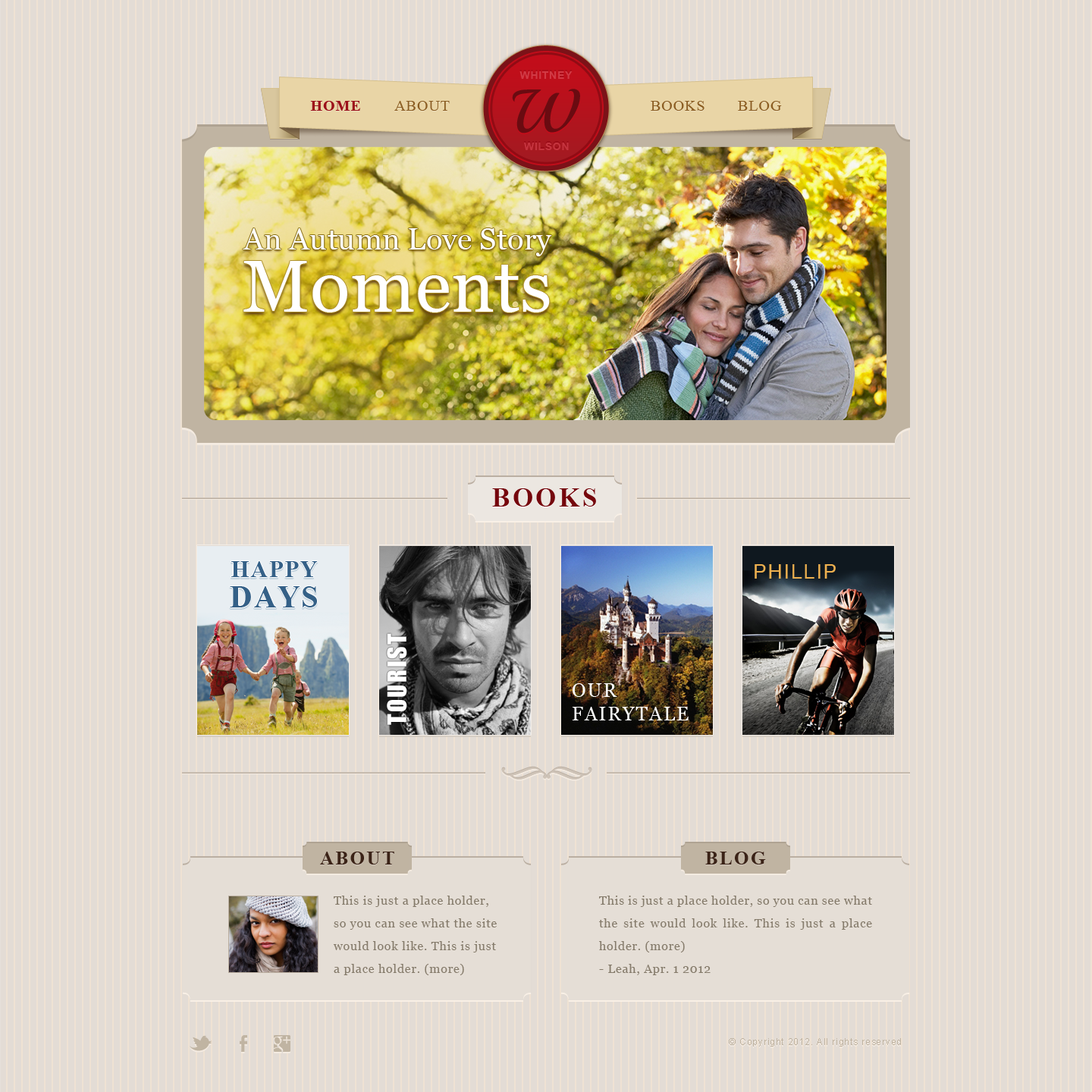
<style>
.page{position:relative;width:1092px;height:1092px;background:#e3dcd5}
.page>*{position:absolute;margin:0}
.t1{font:10.6px "Arial-BoldMT";letter-spacing:0.05em;color:#d23a45;text-transform:uppercase}
.t2{font:61.8px "Playball-Regular";color:#6a0b11;text-transform:uppercase}
.t3{font:15.2px "TimesNewRomanPS-BoldMT";letter-spacing:0.05em;color:#9c1119;text-transform:uppercase}
.t4{font:15.2px "TimesNewRomanPSMT";letter-spacing:0.05em;color:#8b5d21;text-transform:uppercase}
.t5{font:10.6px "Arial-BoldMT";letter-spacing:0.05em;color:#c5343e;text-transform:uppercase}
.t6{font:30.5px "Georgia";color:#ffffff}
.t7{font:73.9px "Georgia";color:#ffffff}
.t8{font:26.5px "TimesNewRomanPS-BoldMT";letter-spacing:0.1em;color:#75060c}
.t9{font:23.8px "TimesNewRomanPS-BoldMT";letter-spacing:0.05em;color:#346087;text-transform:uppercase}
.t10{font:20px "Helvetica";letter-spacing:0.075em;color:#edb04f;text-transform:uppercase}
.t11{font:30.8px "TimesNewRomanPS-BoldMT";letter-spacing:0.05em;color:#346087;text-transform:uppercase}
.t12{font:24.1px "Impact";letter-spacing:0.075em;color:#ffffff;text-transform:uppercase}
.t13{font:19.1px "Georgia";letter-spacing:0.075em;color:#ffffff;text-transform:uppercase}
.t14{font:19px "TimesNewRomanPS-BoldMT";letter-spacing:0.1em;color:#3b2317}
.t15{font:12.1px/22.7px "Georgia";letter-spacing:0.05em;color:#857b6b}
.t16{font:9.1px "ArialMT";letter-spacing:0.075em;color:#c0b4a2}
</style>
<div class="page">
<p class="t1" style="left:519px;top:71px;width:54px;height:8px">Whitney</p>
<p class="t2" style="left:512px;top:89px;width:68px;height:44px">W</p>
<p class="t3" style="left:310px;top:101px;width:50px;height:10px">Home</p>
<p class="t4" style="left:394px;top:101px;width:56px;height:10px">About</p>
<p class="t4" style="left:651px;top:101px;width:53px;height:10px">Books</p>
<p class="t4" style="left:738px;top:101px;width:44px;height:10px">Blog</p>
<p class="t5" style="left:524px;top:143px;width:45px;height:7px">wilson</p>
<p class="t6" style="left:243px;top:228px;width:309px;height:28px">An Autumn Love Story</p>
<p class="t7" style="left:243px;top:261px;width:307px;height:51px">Moments</p>
<p class="t8" style="left:492px;top:488px;width:104px;height:19px">BOOKS</p>
<p class="t9" style="left:231px;top:561px;width:87px;height:16px">Happy</p>
<p class="t10" style="left:755px;top:564px;width:81px;height:15px">phillip</p>
<p class="t11" style="left:230px;top:586px;width:87px;height:21px">days</p>
<p class="t12" style="left:387px;top:633px;width:20px;height:92px;rotate:-90deg">tourist</p>
<p class="t13" style="left:573px;top:683px;width:116px;height:37px">our<br>fairytale</p>
<p class="t14" style="left:320px;top:852px;width:74px;height:12px">ABOUT</p>
<p class="t14" style="left:705px;top:852px;width:61px;height:12px">BLOG</p>
<p class="t15" style="left:333px;top:896px;width:164px;height:79px">This is just a place holder, so you can see what the site would look like. This is just a place holder. (more)</p>
<p class="t15" style="left:599px;top:896px;width:273px;height:79px;text-align:justify">This is just a place holder, so you can see what the site would look like. This is just a place holder. (more)<br>- Leah, Apr. 1 2012</p>
<p class="t16" style="left:729px;top:1038px;width:172px;height:8px">© Copyright 2012. All rights reserved</p>
</div>
